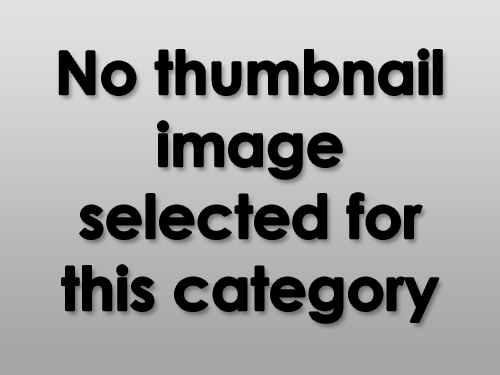
<style>
.page{position:relative;width:500px;height:375px}
.page>*{position:absolute;margin:0}
.t1{font:60px "CenturyGothic-Bold";color:#000000}
</style>
<div class="page">
<p class="t1" style="left:59px;top:49px;width:383px;height:274px;text-align:center">No thumbnail image selected for this category</p>
</div>
